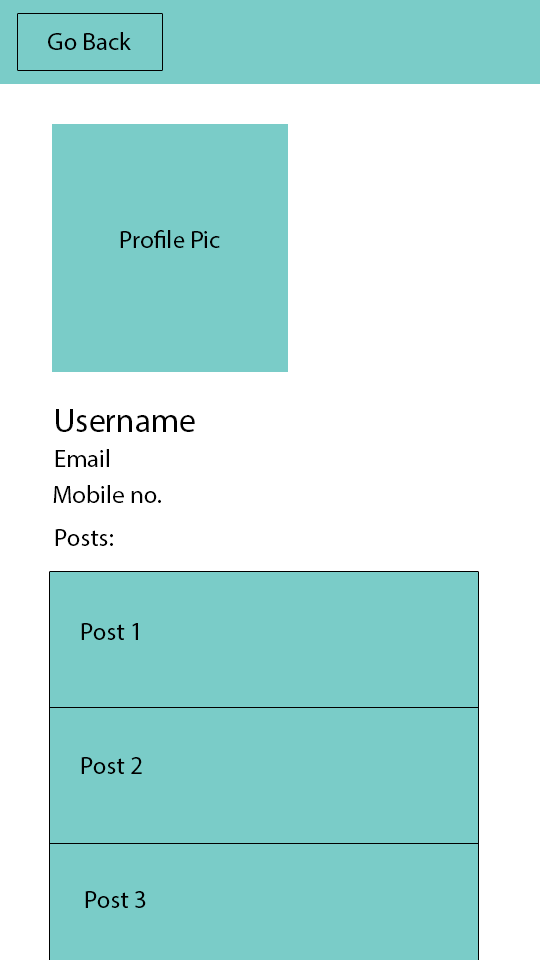
<style>
.page{position:relative;width:540px;height:960px;background:#7accc8}
.page>*{position:absolute;margin:0}
.t1{font:25px "MyriadPro-Regular";color:#000000}
.t2{font:33.3px "MyriadPro-Regular";color:#000000}
</style>
<div class="page">
<p class="t1" style="left:48px;top:32px;width:83px;height:18px">Go Back</p>
<p class="t1" style="left:120px;top:230px;width:100px;height:18px">Profile Pic</p>
<p class="t2" style="left:56px;top:409px;width:139px;height:23px">Username</p>
<p class="t1" style="left:55px;top:449px;width:54px;height:18px">Email</p>
<p class="t1" style="left:53px;top:485px;width:108px;height:18px">Mobile no.</p>
<p class="t1" style="left:55px;top:529px;width:58px;height:17px">Posts:</p>
<p class="t1" style="left:81px;top:623px;width:57px;height:17px">Post 1</p>
<p class="t1" style="left:81px;top:757px;width:61px;height:17px">Post 2</p>
<p class="t1" style="left:85px;top:891px;width:61px;height:17px">Post 3</p>
</div>
